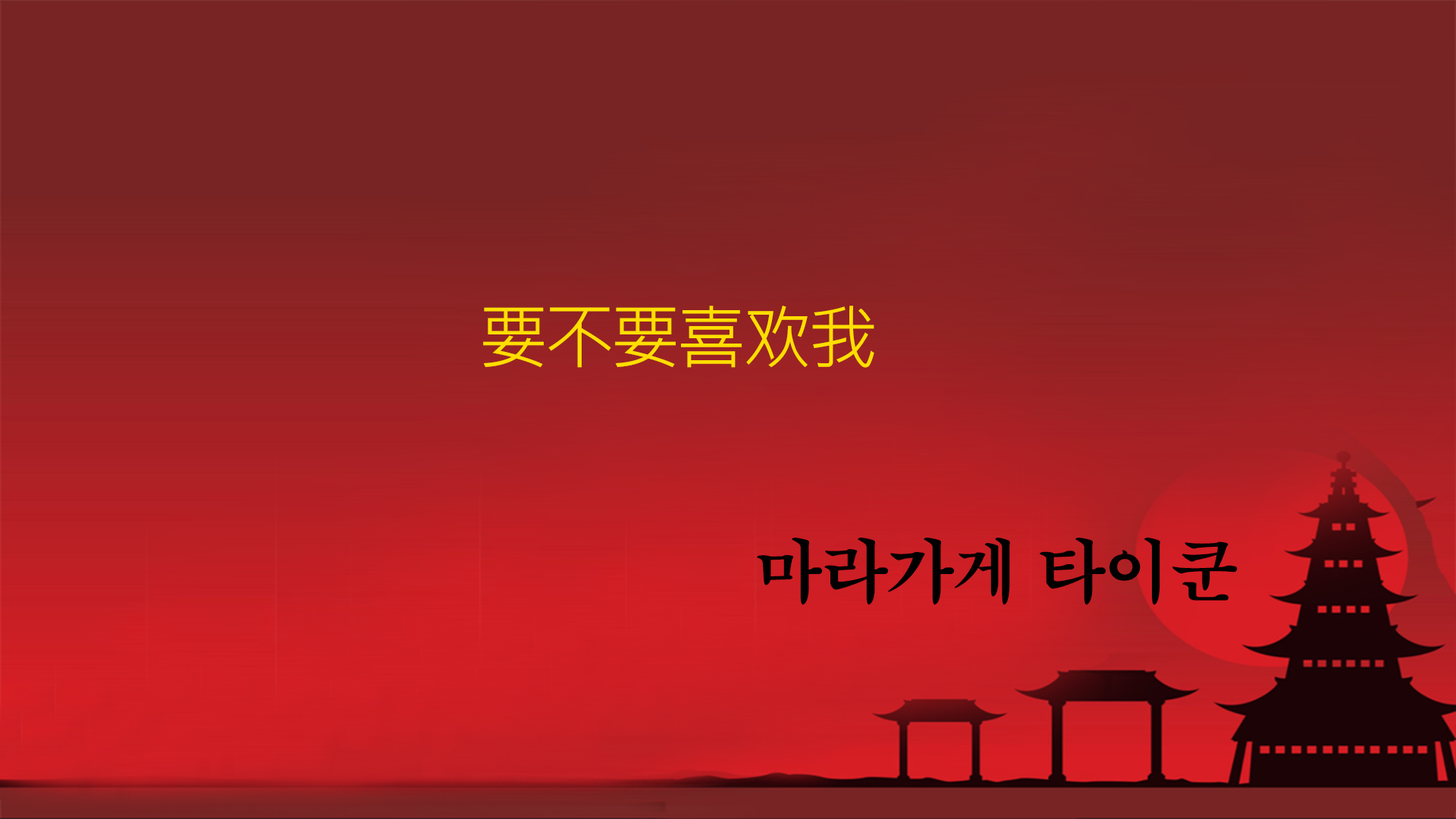
<style>
.page{position:relative;width:1456px;height:819px}
.page>*{position:absolute;margin:0}
.t1{font:69.5px "MicrosoftJhengHeiRegular";letter-spacing:-0.05em;color:#ffde00}
.t2{font:69.5px "H2mjrE";letter-spacing:-0.05em;color:#020000}
</style>
<div class="page">
<p class="t1" style="left:483px;top:306px;width:391px;height:62px">要不要喜欢我</p>
<p class="t2" style="left:757px;top:538px;width:481px;height:67px">마라가게 타이쿤</p>
</div>
